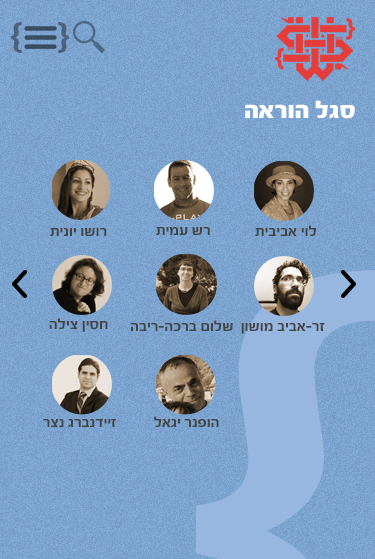
<style>
.page{position:relative;width:375px;height:559px}
.page>*{position:absolute;margin:0}
.t1{font:25px "FbScorpion-Black";color:#ffffff}
.t2{font:15.3px "FbScorpion-Bold";color:#444444}
.t3{font:20px "FbScorpion-Bold";color:#444444}
</style>
<div class="page">
<p class="t1" style="left:245px;top:100px;width:110px;height:19px">הארוה לגס</p>
<p class="t2" style="left:50px;top:228px;width:57px;height:8px">תינוי ושור</p>
<p class="t2" style="left:156px;top:227px;width:54px;height:8px">תימע שר</p>
<p class="t2" style="left:255px;top:225px;width:62px;height:11px">תיביבא יול</p>
<p class="t2" style="left:49px;top:318px;width:59px;height:14px">הליצ ןיסח</p>
<p class="t2" style="left:130px;top:320px;width:103px;height:11px"><span class="t3">  </span>הביר-הכרב םולש</p>
<p class="t2" style="left:241px;top:323px;width:84px;height:11px">ןושומ ביבא-רז</p>
<p class="t2" style="left:43px;top:419px;width:73px;height:9px">רצנ גרבנדייז</p>
<p class="t2" style="left:154px;top:416px;width:65px;height:12px">לאגי רנפוה</p>
</div>
